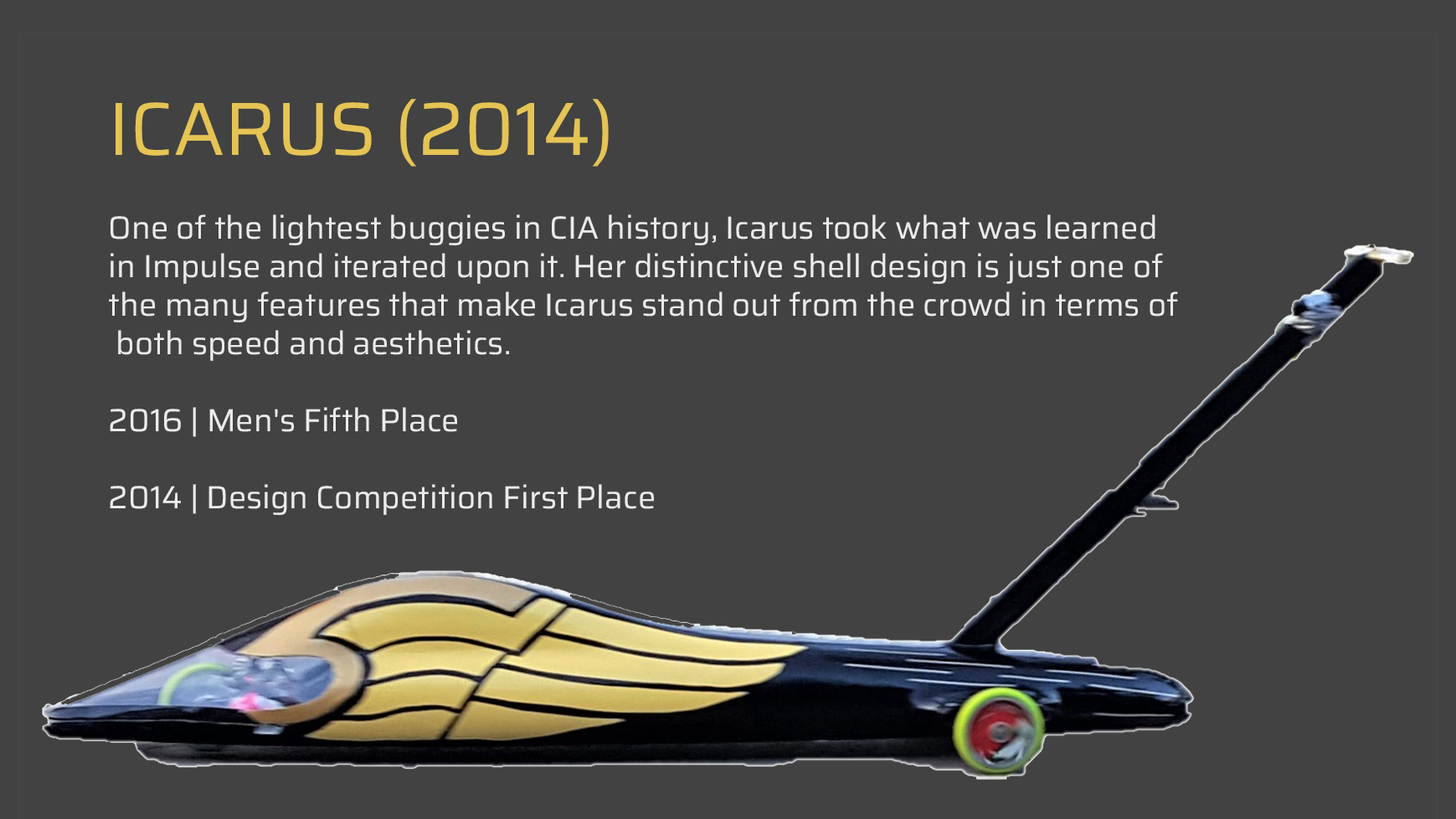
<style>
.page{position:relative;width:1456px;height:819px;background:#424242}
.page>*{position:absolute;margin:0}
.t1{font:75.4px "Saira-Regular";color:#e5c454}
.t2{font:32.1px "Saira-Regular";color:#ebebeb}
</style>
<div class="page">
<p class="t1" style="left:116px;top:99px;width:493px;height:68px">ICARUS (2014)</p>
<p class="t2" style="left:109px;top:214px;width:1069px;height:301px">One of the lightest buggies in CIA history, Icarus took what was learned<br>in Impulse and iterated upon it. Her distinctive shell design is just one of <br>the many features that make Icarus stand out from the crowd in terms of<br> both speed and aesthetics.<br><br>2016 | Men's Fifth Place<br><br>2014 | Design Competition First Place</p>
</div>
